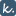
<style>
.page{position:relative;width:16px;height:16px;background:#395971}
.page>*{position:absolute;margin:0}
.t1{font:12px "SegoeScript";color:#ffffff}
</style>
<div class="page">
<p class="t1" style="left:3px;top:3px;width:11px;height:10px">k.</p>
</div>
